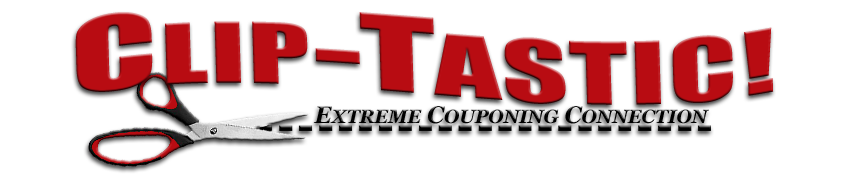
<style>
.page{position:relative;width:850px;height:175px;background:#ffffff}
.page>*{position:absolute;margin:0}
.t1{font:78.7px "Impact";color:#b80c12;scale:1.66 1}
.t2{font:98px "Impact";color:#b80c12;scale:1.66 1}
.t3{font:18.9px "Georgia-BoldItalic";color:#000000}
.t4{font:23.6px "Georgia-BoldItalic";color:#000000}
</style>
<div class="page">
<p class="t1" style="left:75px;top:12px;width:699px;height:93px;rotate:-1deg"><span class="t2">C</span>LIP<span class="t2">-T</span>ASTIC!</p>
<p class="t3" style="left:313px;top:106px;width:396px;height:18px"><span class="t4">E</span>XTREME<span class="t4"> C</span>OUPONING<span class="t4"> C</span>ONNECTION</p>
</div>
